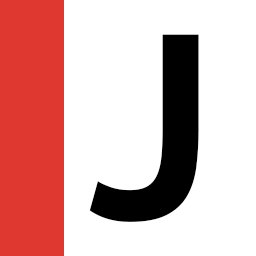
<style>
.page{position:relative;width:256px;height:256px;background:#ffffff}
.page>*{position:absolute;margin:0}
.t1{font:260px "Raleway-Bold";letter-spacing:-0.035em;color:#000000}
</style>
<div class="page">
<p class="t1" style="left:89px;top:34px;width:110px;height:188px">J</p>
</div>
